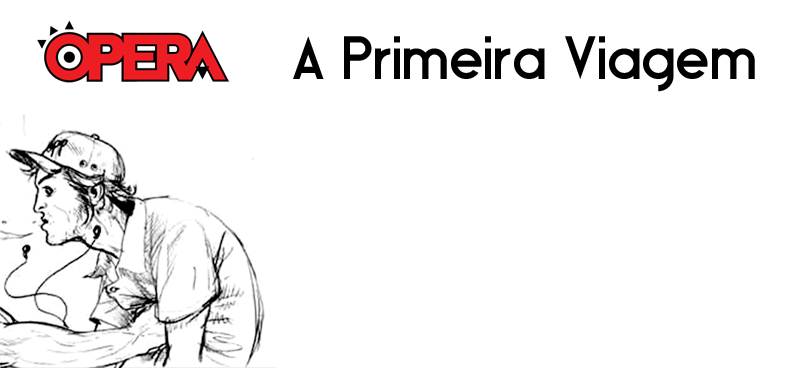
<style>
.page{position:relative;width:800px;height:368px;background:#ffffff}
.page>*{position:absolute;margin:0}
.t1{font:62.5px "BlissfulThinking";letter-spacing:0.012em;color:#000000}
.t2{font:62.5px "BlissfulThinking";letter-spacing:0.012em}
</style>
<div class="page">
<p class="t1" style="left:293px;top:36px;width:462px;height:56px">A Primeira Viagem</p>
<p class="t2" style="left:295px;top:38px;width:462px;height:56px">A Primeira Viagem</p>
</div>
